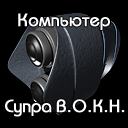
<style>
.page{position:relative;width:128px;height:128px;background:#000000}
.page>*{position:absolute;margin:0}
.t1{font:18px "BauhausC-Medium";color:#ffffff;font-weight:bold}
.t2{font:18px "BauhausC-Medium";letter-spacing:-0.025em;color:#ffffff;font-weight:bold}
</style>
<div class="page">
<p class="t1" style="left:18px;top:13px;width:92px;height:17px">Компьютер</p>
<p class="t1" style="left:5px;top:99px;width:120px;height:18px"><span class="t2">Супра </span>В.О.К.Н.</p>
</div>
